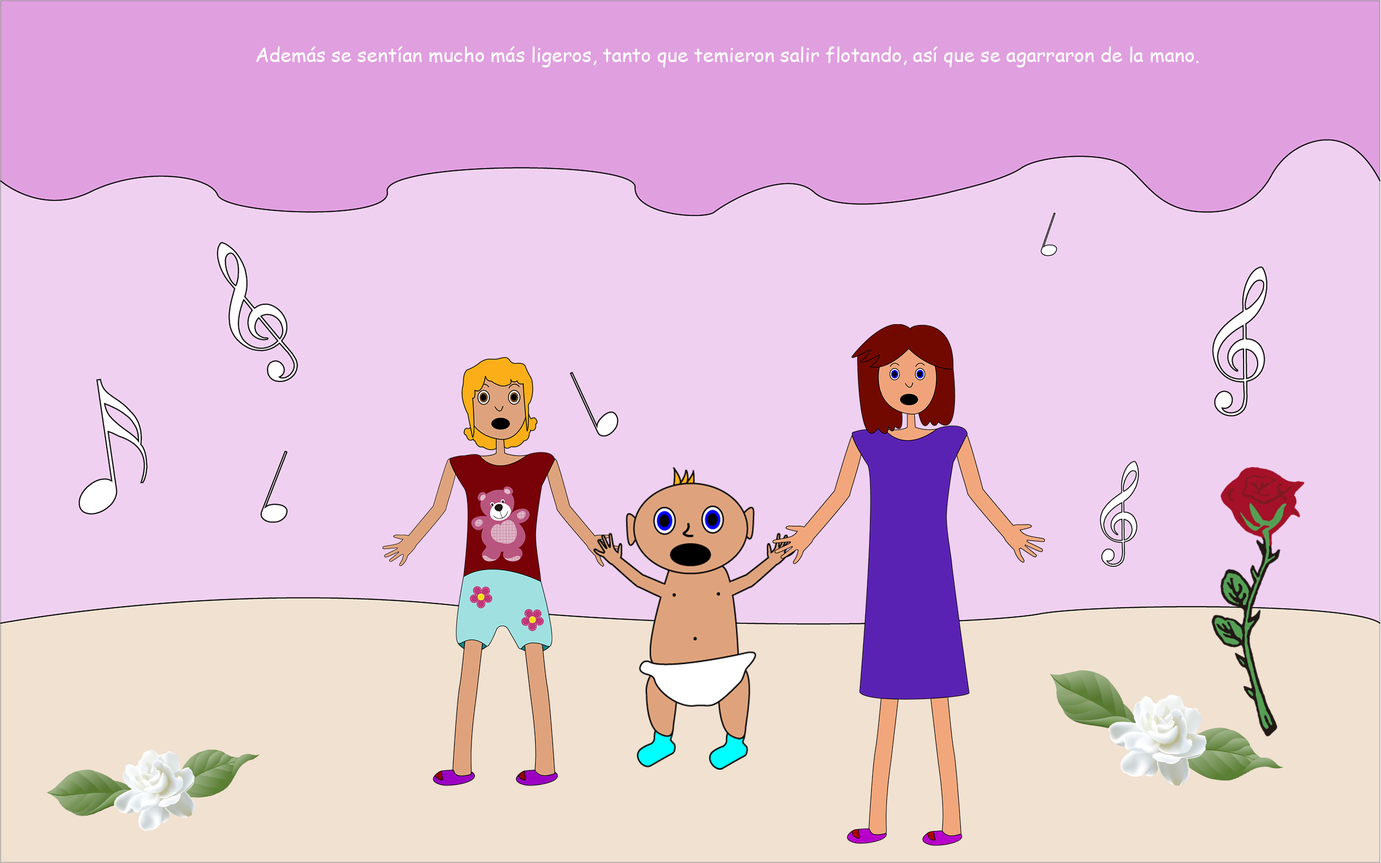
<style>
.page{position:relative;width:1381px;height:863px;background:#efd0f0}
.page>*{position:absolute;margin:0}
.t1{font:19.4px "ComicSansMS";color:#ffffff}
</style>
<div class="page">
<p class="t1" style="left:256px;top:46px;width:943px;height:21px">Además se sentían mucho más ligeros, tanto que temieron salir flotando, así que se agarraron de la mano.</p>
</div>
